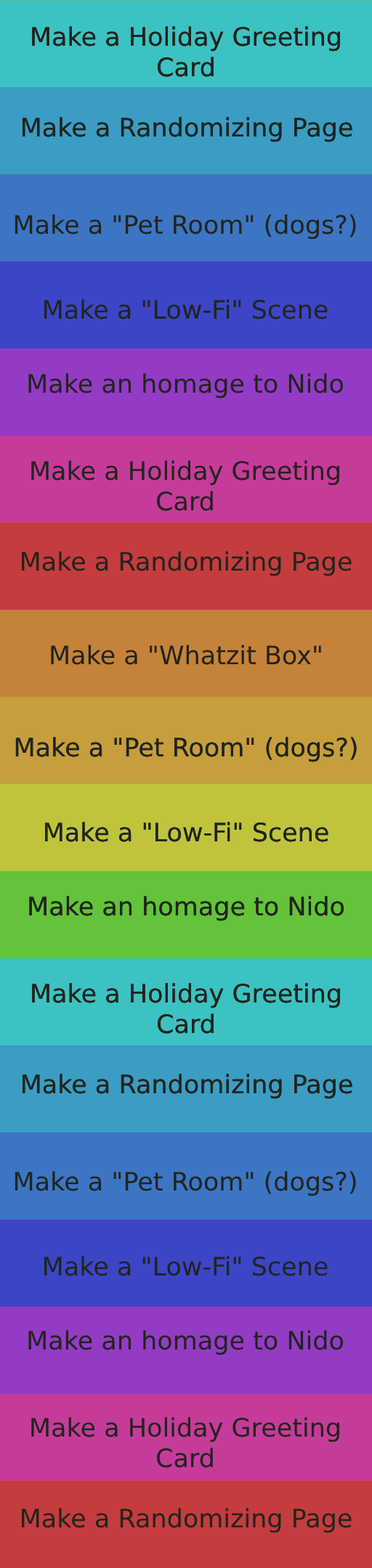
<style>
.page{position:relative;width:372px;height:1568px}
.page>*{position:absolute;margin:0}
.t1{font:25.4px "DejaVuSans";color:#21241d}
</style>
<div class="page">
<p class="t1" style="left:32px;top:26px;width:308px;height:51px;text-align:center">Make a Holiday Greeting Card</p>
<p class="t1" style="left:32px;top:26px;width:308px;height:51px;text-align:center">Make a Holiday Greeting Card</p>
<p class="t1" style="left:22px;top:117px;width:330px;height:25px">Make a Randomizing Page</p>
<p class="t1" style="left:22px;top:117px;width:330px;height:25px">Make a Randomizing Page</p>
<p class="t1" style="left:15px;top:214px;width:341px;height:26px">Make a "Pet Room" (dogs?)</p>
<p class="t1" style="left:44px;top:299px;width:283px;height:20px">Make a "Low-Fi" Scene</p>
<p class="t1" style="left:28px;top:373px;width:315px;height:26px">Make an homage to Nido</p>
<p class="t1" style="left:31px;top:460px;width:308px;height:51px;text-align:center">Make a Holiday Greeting Card</p>
<p class="t1" style="left:21px;top:551px;width:330px;height:25px">Make a Randomizing Page</p>
<p class="t1" style="left:51px;top:645px;width:270px;height:20px">Make a "Whatzit Box"</p>
<p class="t1" style="left:15px;top:737px;width:341px;height:25px">Make a "Pet Room" (dogs?)</p>
<p class="t1" style="left:15px;top:737px;width:341px;height:25px">Make a "Pet Room" (dogs?)</p>
<p class="t1" style="left:45px;top:822px;width:283px;height:20px">Make a "Low-Fi" Scene</p>
<p class="t1" style="left:45px;top:822px;width:283px;height:20px">Make a "Low-Fi" Scene</p>
<p class="t1" style="left:29px;top:896px;width:315px;height:25px">Make an homage to Nido</p>
<p class="t1" style="left:29px;top:896px;width:315px;height:25px">Make an homage to Nido</p>
<p class="t1" style="left:32px;top:983px;width:308px;height:51px;text-align:center">Make a Holiday Greeting Card</p>
<p class="t1" style="left:32px;top:983px;width:308px;height:51px;text-align:center">Make a Holiday Greeting Card</p>
<p class="t1" style="left:22px;top:1074px;width:330px;height:25px">Make a Randomizing Page</p>
<p class="t1" style="left:22px;top:1074px;width:330px;height:25px">Make a Randomizing Page</p>
<p class="t1" style="left:15px;top:1171px;width:341px;height:25px">Make a "Pet Room" (dogs?)</p>
<p class="t1" style="left:44px;top:1256px;width:283px;height:20px">Make a "Low-Fi" Scene</p>
<p class="t1" style="left:28px;top:1330px;width:315px;height:25px">Make an homage to Nido</p>
<p class="t1" style="left:31px;top:1417px;width:308px;height:51px;text-align:center">Make a Holiday Greeting Card</p>
<p class="t1" style="left:21px;top:1508px;width:330px;height:25px">Make a Randomizing Page</p>
</div>
